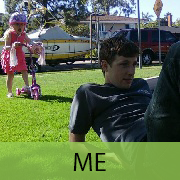
<style>
.page{position:relative;width:180px;height:180px}
.page>*{position:absolute;margin:0}
.t1{font:26.7px "MyriadPro-Regular";color:#030303}
</style>
<div class="page">
<p class="t1" style="left:73px;top:153px;width:33px;height:18px">ME</p>
</div>
